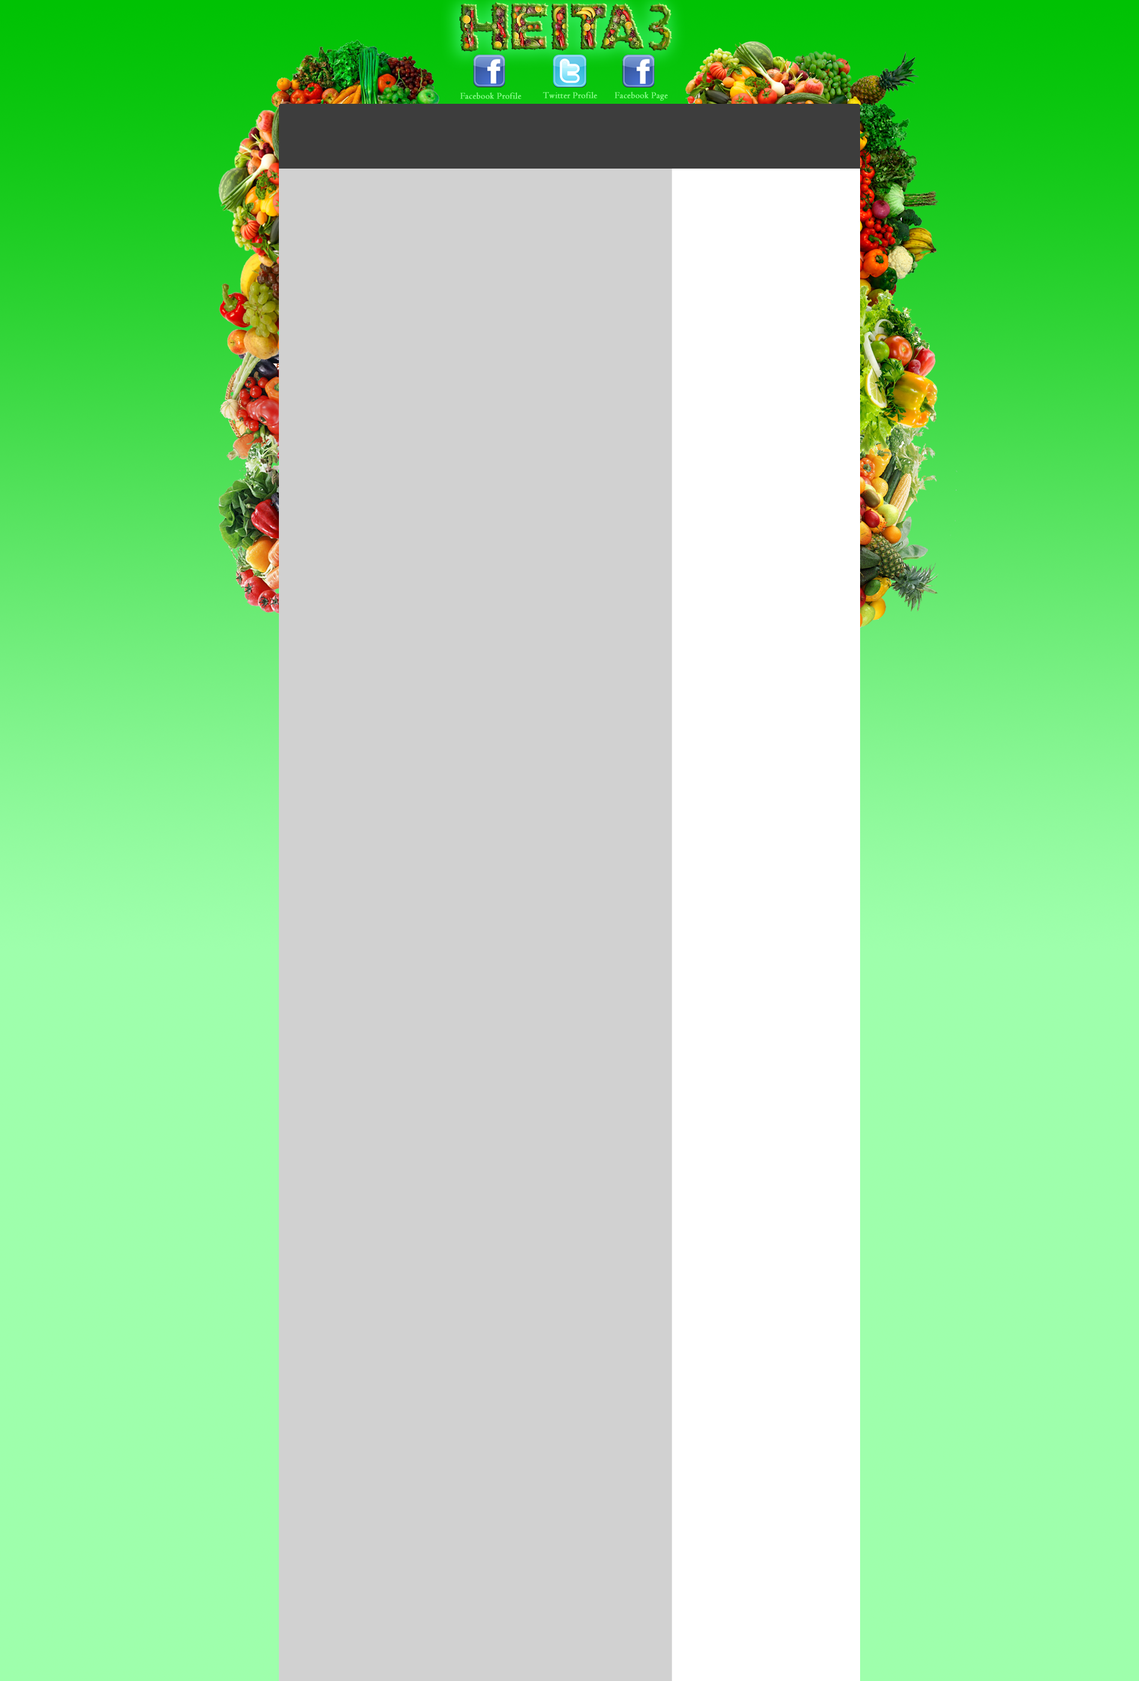
<style>
.page{position:relative;width:1139px;height:1681px;background:#d1d1d1}
.page>*{position:absolute;margin:0}
.t1{font:9px "Centaur";letter-spacing:0.01em;color:#8eff90;font-weight:bold}
</style>
<div class="page">
<p class="t1" style="left:460px;top:92px;width:61px;height:7px">Facebook Profile</p>
<p class="t1" style="left:543px;top:92px;width:55px;height:6px">Twitter Profile</p>
<p class="t1" style="left:615px;top:92px;width:53px;height:9px">Facebook Page</p>
</div>
